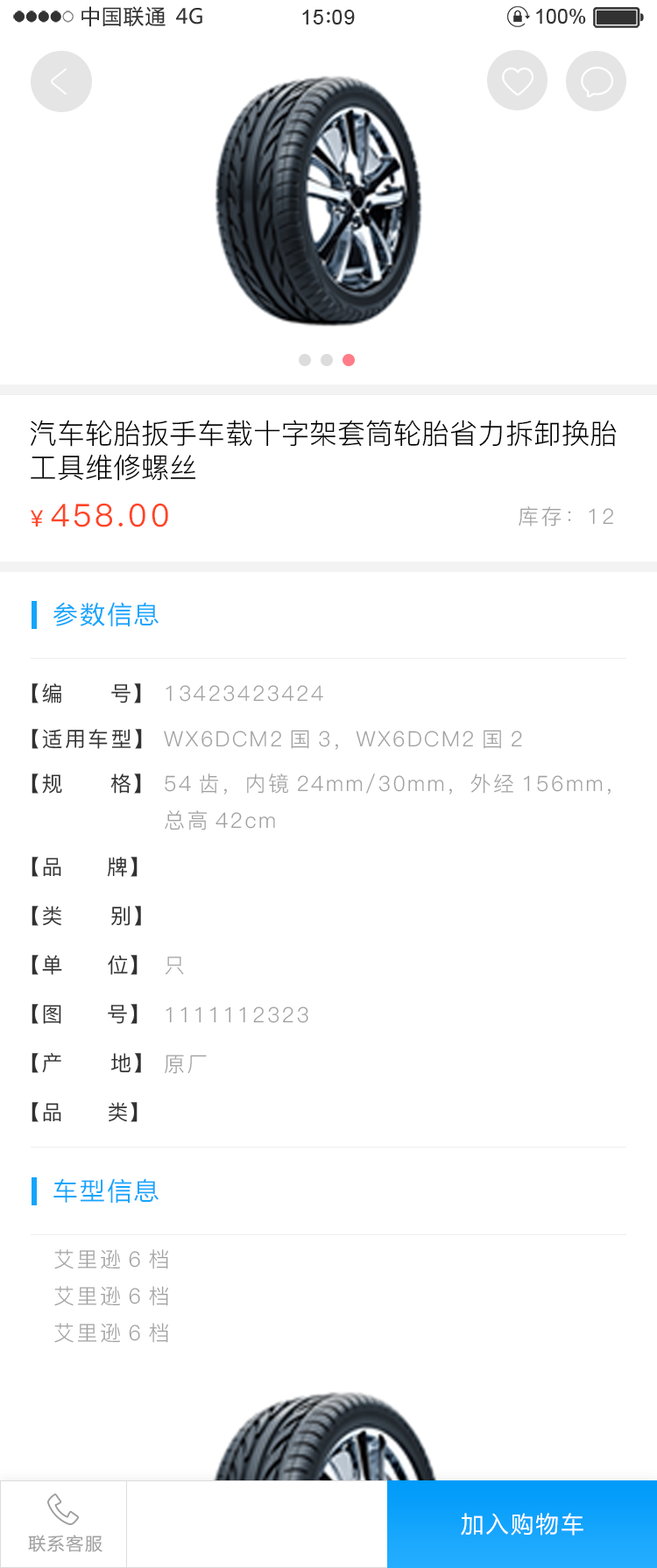
<style>
.page{position:relative;width:657px;height:1568px;background:#ffffff}
.page>*{position:absolute;margin:0}
.t1{font:20.5px "MicrosoftYaHei";letter-spacing:0.06em;color:#323232}
.t2{font:20.5px "MicrosoftYaHei";letter-spacing:0.02em;color:#323232}
.t3{font:20.5px "ArialMT";letter-spacing:0.04em;color:#323232}
.t4{font:20.5px "ArialMT";color:#323232}
.t5{font:28px/34px "PingFang-SC-Regular";color:#000000}
.t6{font:31.5px "PingFang-SC-Medium";letter-spacing:0.1em;color:#ff4526}
.t7{font:22.8px "PingFang-SC-Medium";letter-spacing:0.1em;color:#ff4526}
.t8{font:21px "PingFang-SC-Regular";letter-spacing:0.1em;color:#a0a0a0}
.t9{font:24.3px "MicrosoftYaHei";letter-spacing:0.1em;color:#14a5fc}
.t10{font:21px "PingFang-SC-Medium";letter-spacing:0.1em;color:#313131}
.t11{font:21px "PingFang-SC-Medium";letter-spacing:0.075em;color:#313131}
.t12{font:20.8px "PingFang-SC-Medium";letter-spacing:0.075em;color:#313131}
.t13{font:20.8px "PingFang-SC-Medium";letter-spacing:0.1em;color:#313131}
.t14{font:20.8px "PingFang-SC-Regular";letter-spacing:0.1em;color:#a0a0a0}
.t15{font:22.8px "MicrosoftYaHei";letter-spacing:0.1em;color:#ffffff}
.t16{font:17.4px "MicrosoftYaHei";letter-spacing:0.075em;color:#9f9f9f}
</style>
<div class="page">
<p class="t1" style="left:81px;top:6px;width:85px;height:21px">中国联通</p>
<p class="t2" style="left:176px;top:8px;width:26px;height:17px">4G</p>
<p class="t3" style="left:302px;top:10px;width:53px;height:15px">15 09</p>
<p class="t4" style="left:536px;top:9px;width:50px;height:15px">100%</p>
<p class="t5" style="left:30px;top:420px;width:587px;height:61px">汽车轮胎扳手车载十字架套筒轮胎省力拆卸换胎<br>工具维修螺丝</p>
<p class="t6" style="left:31px;top:503px;width:137px;height:24px"><span class="t7">￥</span>458.00</p>
<p class="t8" style="left:519px;top:506px;width:94px;height:20px">库存：12</p>
<p class="t9" style="left:53px;top:602px;width:106px;height:24px">参数信息</p>
<p class="t10" style="left:32px;top:683px;width:109px;height:20px">【编     号】</p>
<p class="t8" style="left:166px;top:685px;width:157px;height:17px">13423423424</p>
<p class="t10" style="left:32px;top:729px;width:110px;height:20px">【适用车型】</p>
<p class="t8" style="left:164px;top:730px;width:358px;height:20px">WX6DCM2国3，WX6DCM2国2</p>
<p class="t10" style="left:32px;top:773px;width:109px;height:21px">【规     格】</p>
<p class="t8" style="left:165px;top:773px;width:446px;height:57px">54齿，内镜24mm/30mm，外经156mm，<br>总高42cm</p>
<p class="t11" style="left:32px;top:857px;width:106px;height:20px"><span class="t10">【</span>品     牌<span class="t10">】</span></p>
<p class="t10" style="left:32px;top:906px;width:109px;height:20px">【类     别】</p>
<p class="t12" style="left:32px;top:955px;width:106px;height:20px"><span class="t13">【</span>单     位<span class="t13">】</span></p>
<p class="t14" style="left:165px;top:957px;width:19px;height:18px">只</p>
<p class="t11" style="left:32px;top:1004px;width:106px;height:20px"><span class="t10">【</span>图     号<span class="t10">】</span></p>
<p class="t8" style="left:166px;top:1006px;width:142px;height:17px">1111112323</p>
<p class="t10" style="left:32px;top:1053px;width:109px;height:20px">【产     地】</p>
<p class="t8" style="left:165px;top:1055px;width:42px;height:19px">原厂</p>
<p class="t12" style="left:32px;top:1102px;width:106px;height:20px"><span class="t13">【</span>品     类<span class="t13">】</span></p>
<p class="t9" style="left:53px;top:1178px;width:106px;height:25px">车型信息</p>
<p class="t8" style="left:54px;top:1249px;width:114px;height:94px">艾里逊6档<br>艾里逊6档<br>艾里逊6档</p>
<p class="t15" style="left:461px;top:1513px;width:122px;height:23px">加入购物车</p>
<p class="t16" style="left:28px;top:1535px;width:74px;height:17px">联系客服</p>
</div>
